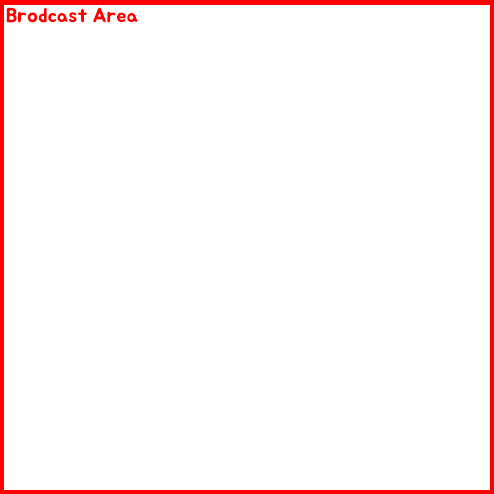
<style>
.page{position:relative;width:494px;height:494px;background:#ffffff}
.page>*{position:absolute;margin:0}
.t1{font:20px "BMJUA";color:#ff0000}
</style>
<div class="page">
<p class="t1" style="left:6px;top:7px;width:132px;height:16px">Brodcast Area</p>
</div>
